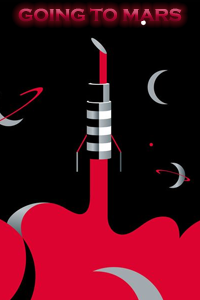
<style>
.page{position:relative;width:200px;height:300px;background:#000000}
.page>*{position:absolute;margin:0}
.t1{font:18px "CopperplateGothic-Bold"}
</style>
<div class="page">
<p class="t1" style="left:18px;top:8px;width:164px;height:14px">GOING TO MARS</p>
</div>
